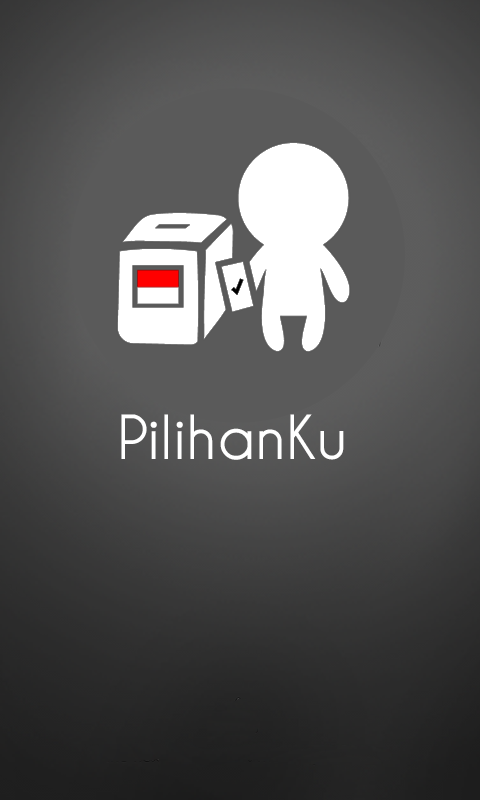
<style>
.page{position:relative;width:480px;height:800px}
.page>*{position:absolute;margin:0}
.t1{font:60.3px "CaviarDreams-Bold";color:#ffffff}
</style>
<div class="page">
<p class="t1" style="left:121px;top:414px;width:223px;height:46px">PilihanKu</p>
</div>
